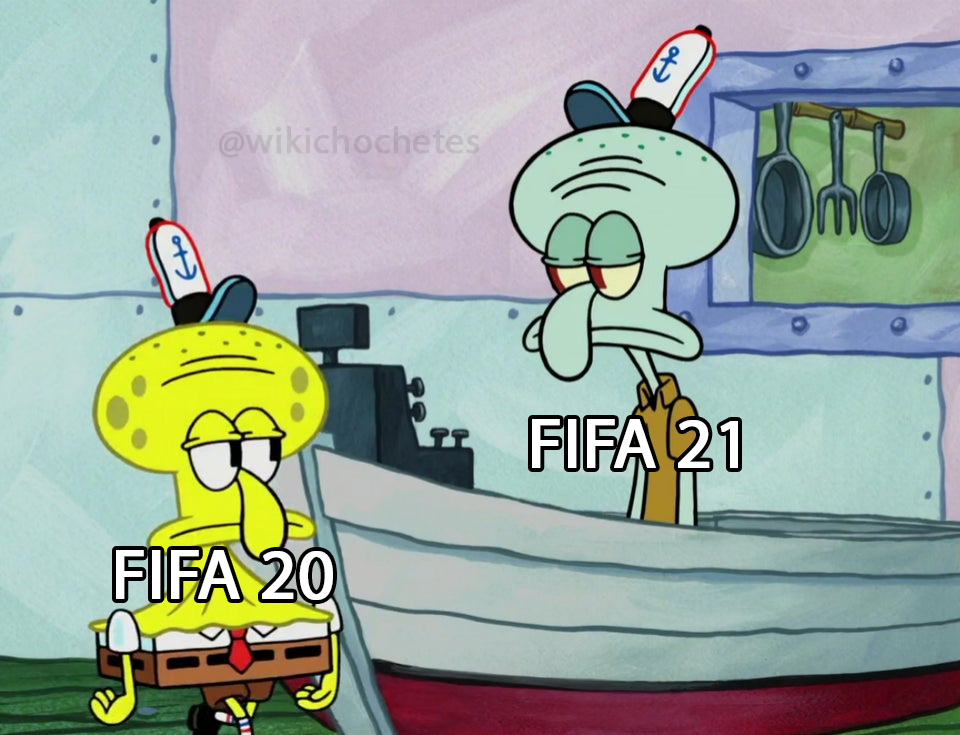
<style>
.page{position:relative;width:960px;height:735px}
.page>*{position:absolute;margin:0}
.t1{font:37.2px "MyriadPro-Regular";color:#bbafbd;font-weight:bold}
.t2{font:70.7px "MyriadPro-Regular";color:#ffffff;font-weight:bold}
</style>
<div class="page">
<p class="t1" style="left:219px;top:126px;width:261px;height:32px">@wikichochetes</p>
<p class="t2" style="left:532px;top:419px;width:206px;height:49px">FIFA 21</p>
<p class="t2" style="left:116px;top:550px;width:217px;height:50px">FIFA 20</p>
</div>
